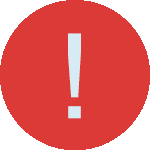
<style>
.page{position:relative;width:150px;height:150px;background:#db3a37}
.page>*{position:absolute;margin:0}
.t1{font:118.1px "ArialMT";color:#d7ebf4}
</style>
<div class="page">
<p class="t1" style="left:68px;top:33px;width:13px;height:86px">!</p>
</div>
